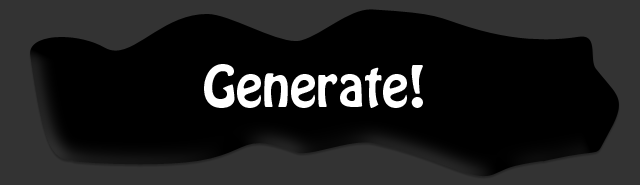
<style>
.page{position:relative;width:640px;height:185px;background:#000000}
.page>*{position:absolute;margin:0}
.t1{font:50.3px "HoboStd";color:#ffffff}
</style>
<div class="page">
<p class="t1" style="left:204px;top:64px;width:219px;height:44px">Generate!</p>
</div>
